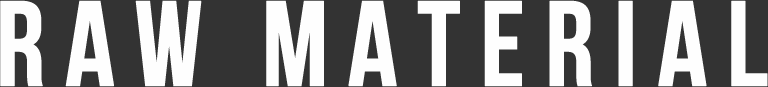
<style>
.page{position:relative;width:768px;height:87px;background:#333333}
.page>*{position:absolute;margin:0}
.t1{font:120.8px "BebasNeue";letter-spacing:0.14em;color:#fefefe;font-weight:bold}
</style>
<div class="page">
<p class="t1" style="left:0px;top:0px;width:768px;height:87px">RAW MATERIAL</p>
</div>
